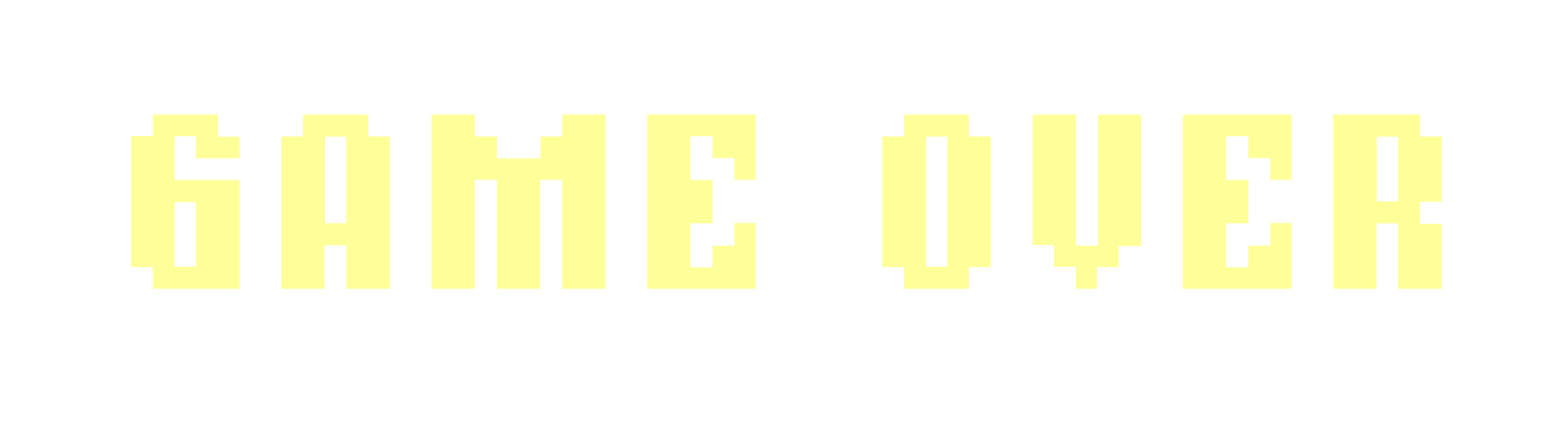
<style>
.page{position:relative;width:1568px;height:436px;background:#ffffff}
.page>*{position:absolute;margin:0}
.t1{font:261.3px "BMgermarA12";letter-spacing:0.075em;color:#ffff99}
</style>
<div class="page">
<p class="t1" style="left:131px;top:114px;width:1311px;height:175px">GAME OVER</p>
</div>
